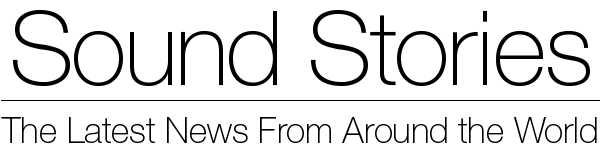
<style>
.page{position:relative;width:600px;height:160px;background:#ffffff}
.page>*{position:absolute;margin:0}
.t1{font:103.2px "HelveticaNeue-Thin";letter-spacing:-0.025em;color:#000000}
.t2{font:103.2px "HelveticaNeue-Thin";color:#000000}
.t3{font:35.1px "HelveticaNeue-Thin";color:#000000}
</style>
<div class="page">
<p class="t1" style="left:13px;top:9px;width:577px;height:78px">Sound Sto<span class="t2">ri</span>es</p>
<p class="t3" style="left:1px;top:117px;width:596px;height:26px">The Latest News From Around the World</p>
</div>
